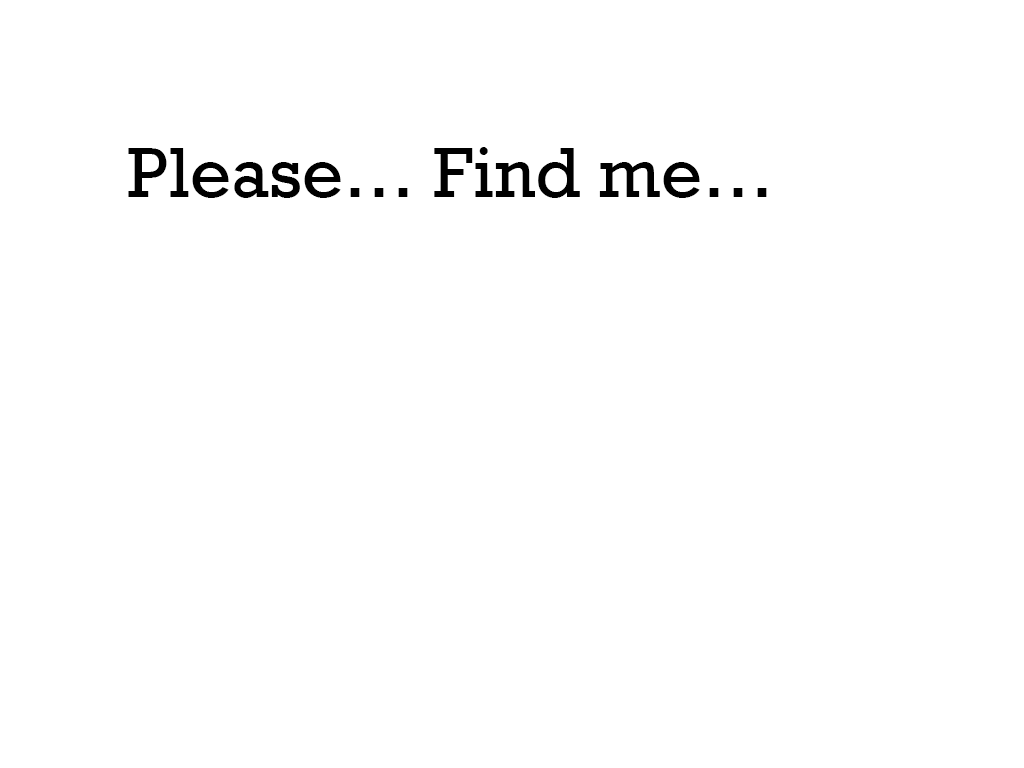
<style>
.page{position:relative;width:1024px;height:768px;background:#ffffff}
.page>*{position:absolute;margin:0}
.t1{font:72px "Rockwell";color:#000000}
</style>
<div class="page">
<p class="t1" style="left:128px;top:147px;width:639px;height:51px">Please… Find me…</p>
</div>
